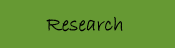
<style>
.page{position:relative;width:175px;height:48px;background:#669933}
.page>*{position:absolute;margin:0}
.t1{font:21px "BradleyHandITC";color:#000000}
</style>
<div class="page">
<p class="t1" style="left:46px;top:16px;width:77px;height:16px">Research</p>
</div>
